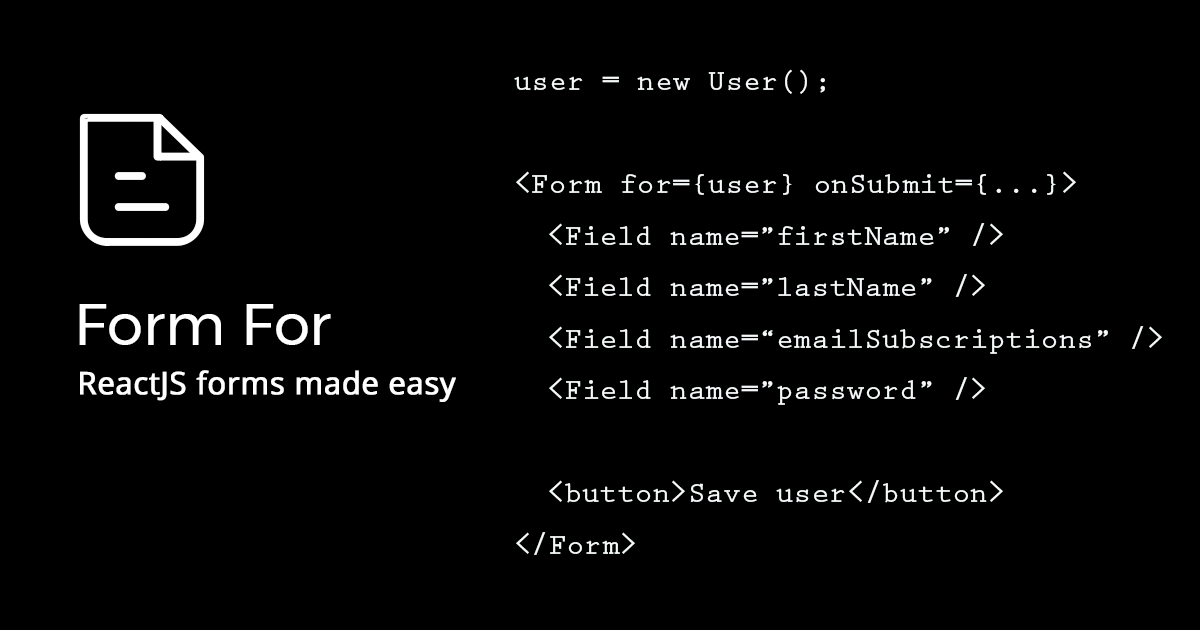
<style>
.page{position:relative;width:1200px;height:630px;background:#000000}
.page>*{position:absolute;margin:0}
.t1{font:29.4px/51.5px "PrestigeEliteStd-Bd";color:#f5f9fa}
.t2{font:58px "Montserrat-Regular";color:#ffffff}
.t3{font:31px "OpenSans-Regular";color:#ffffff;font-weight:bold}
</style>
<div class="page">
<p class="t1" style="left:514px;top:69px;width:648px;height:486px">user = new User();<br><br>&lt;Form for={user} onSubmit={...}&gt;<br> &lt;Field name=”firstName” /&gt;<br> &lt;Field name=”lastName” /&gt;<br> &lt;Field name=“emailSubscriptions” /&gt;<br> &lt;Field name=”password” /&gt;<br> <br> &lt;button&gt;Save user&lt;/button&gt;<br>&lt;/Form&gt;</p>
<p class="t2" style="left:79px;top:304px;width:252px;height:41px">Form For</p>
<p class="t3" style="left:80px;top:370px;width:376px;height:32px">ReactJS forms made easy</p>
</div>
